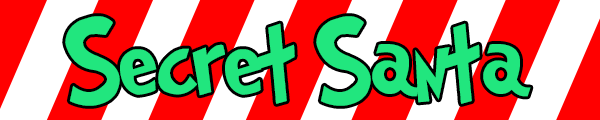
<style>
.page{position:relative;width:600px;height:120px;background:#ff0000}
.page>*{position:absolute;margin:0}
.t1{font:100px "Grinched";color:#21e67e}
</style>
<div class="page">
<p class="t1" style="left:65px;top:16px;width:466px;height:90px">Secret Santa</p>
</div>
